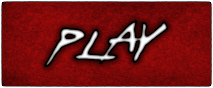
<style>
.page{position:relative;width:213px;height:88px}
.page>*{position:absolute;margin:0}
.t1{font:85.3px "Twister-Regular";text-transform:uppercase;font-style:italic;scale:1.12 1}
</style>
<div class="page">
<p class="t1" style="left:45px;top:21px;width:123px;height:46px">Play</p>
</div>
